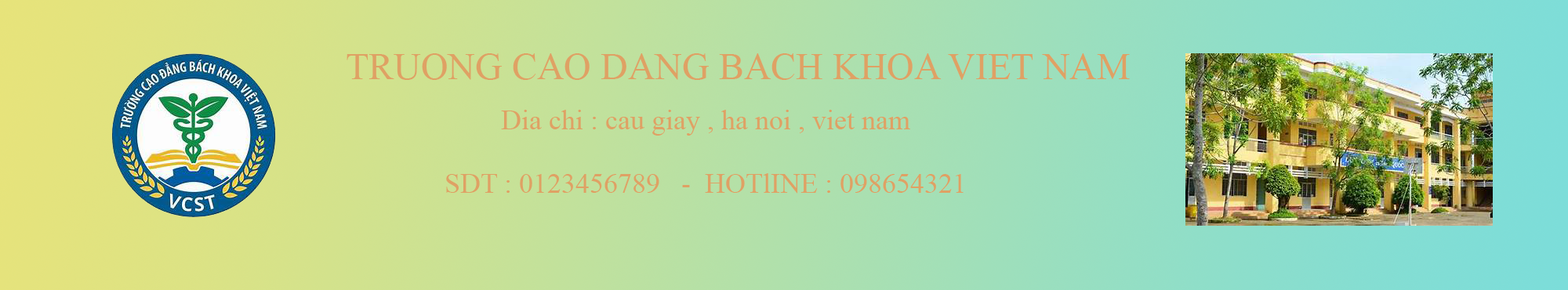
<style>
.page{position:relative;width:1568px;height:290px}
.page>*{position:absolute;margin:0}
.t1{font:37.6px "TimesNewRomanPSMT";color:#dfa164}
.t2{font:28.2px "TimesNewRomanPSMT";color:#dfa164}
</style>
<div class="page">
<p class="t1" style="left:347px;top:53px;width:783px;height:27px">TRUONG CAO DANG BACH KHOA VIET NAM</p>
<p class="t2" style="left:501px;top:110px;width:409px;height:26px">Dia chi : cau giay , ha noi , viet nam</p>
<p class="t2" style="left:446px;top:173px;width:518px;height:21px">SDT : 0123456789   -  HOTlINE : 098654321</p>
</div>
